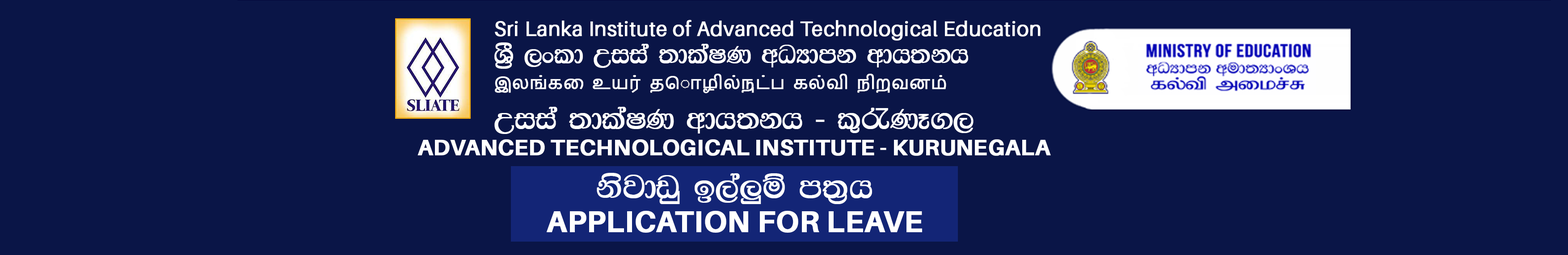
<style>
.page{position:relative;width:1568px;height:255px;background:#0a1547}
.page>*{position:absolute;margin:0}
.t1{font:20.5px "Aileron-Regular";color:#ffffff;font-weight:bold}
.t2{font:26.1px "FMBindumathix";color:#ffffff;font-weight:bold}
.t3{font:16.8px "NirmalaUI";color:#ffffff;font-weight:bold}
.t4{font:29.8px "FMBindumathix";color:#ffffff;font-weight:bold}
.t5{font:22.3px "Aileron-Bold";color:#ffffff;font-weight:bold}
.t6{font:33.5px "FMBindumathix";color:#ffffff;font-weight:bold}
.t7{font:29.8px "Aileron-Bold";color:#ffffff;font-weight:bold}
</style>
<div class="page">
<p class="t1" style="left:495px;top:20px;width:546px;height:21px">Sri Lanka Institute of Advanced Technological Education</p>
<p class="t2" style="left:494px;top:42px;width:474px;height:27px">› ,xld Wiia ;dlaIK wOHdmk wdh;kh</p>
<p class="t3" style="left:495px;top:74px;width:451px;height:19px">இலங்கை  உயர்  தொழில்நுட்ப  கல்வி  நிறுவனம்</p>
<p class="t4" style="left:494px;top:107px;width:480px;height:27px">Wiia ;dlaIK wdh;kh - l=/KE.,</p>
<p class="t5" style="left:417px;top:139px;width:634px;height:17px">ADVANCED TECHNOLOGICAL INSTITUTE - KURUNEGALA</p>
<p class="t6" style="left:597px;top:173px;width:275px;height:31px">ksjdvq b,a¨ï m;%h</p>
<p class="t7" style="left:547px;top:211px;width:375px;height:22px">APPLICATION FOR LEAVE</p>
</div>
